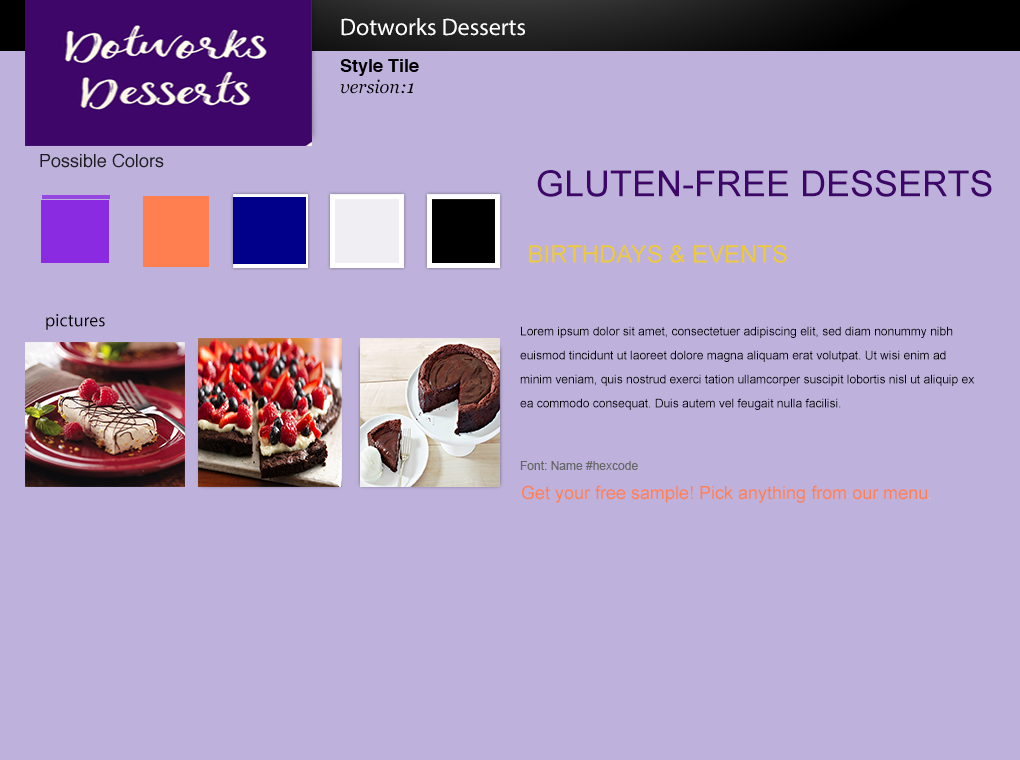
<style>
.page{position:relative;width:1020px;height:760px;background:#beb1db}
.page>*{position:absolute;margin:0}
.t1{font:24px "MyriadPro-Regular";color:#ffffff}
.t2{font:18px "Helvetica-Bold";color:#000000}
.t3{font:18px "Georgia-Italic";color:#000000}
.t4{font:18px "Helvetica";color:#1f1d24}
.t5{font:36px "ArialMT";color:#3e0668}
.t6{font:24px "ArialMT";color:#edca35}
.t7{font:18px "MyriadPro-Regular";color:#000000}
.t8{font:12px/24px "ArialMT";color:#000000}
.t9{font:12px "ArialMT";color:#666666}
.t10{font:18px "ArialMT";color:#ff7f50}
.t11{font:12px "ArialMT";color:#f3ee5c}
</style>
<div class="page">
<p class="t1" style="left:341px;top:18px;width:184px;height:18px">Dotworks Desserts</p>
<p class="t2" style="left:340px;top:59px;width:79px;height:17px">Style Tile</p>
<p class="t3" style="left:340px;top:79px;width:74px;height:15px">version:1</p>
<p class="t4" style="left:40px;top:153px;width:124px;height:15px">Possible Colors</p>
<p class="t5" style="left:537px;top:170px;width:455px;height:27px">GLUTEN-FREE DESSERTS</p>
<p class="t6" style="left:529px;top:245px;width:258px;height:18px">BIRTHDAYS &amp; EVENTS</p>
<p class="t7" style="left:46px;top:314px;width:59px;height:16px">pictures</p>
<p class="t8" style="left:520px;top:326px;width:455px;height:84px">Lorem ipsum dolor sit amet, consectetuer adipiscing elit, sed diam nonummy nibh euismod tincidunt ut laoreet dolore magna aliquam erat volutpat. Ut wisi enim ad minim veniam, quis nostrud exerci tation ullamcorper suscipit lobortis nisl ut aliquip ex ea commodo consequat. Duis autem vel feugait nulla facilisi.</p>
<p class="t9" style="left:520px;top:461px;width:118px;height:9px">Font: Name #hexcode</p>
<p class="t10" style="left:522px;top:485px;width:409px;height:18px">Get your free sample! Pick anything from our menu<span class="t11">.</span></p>
</div>
